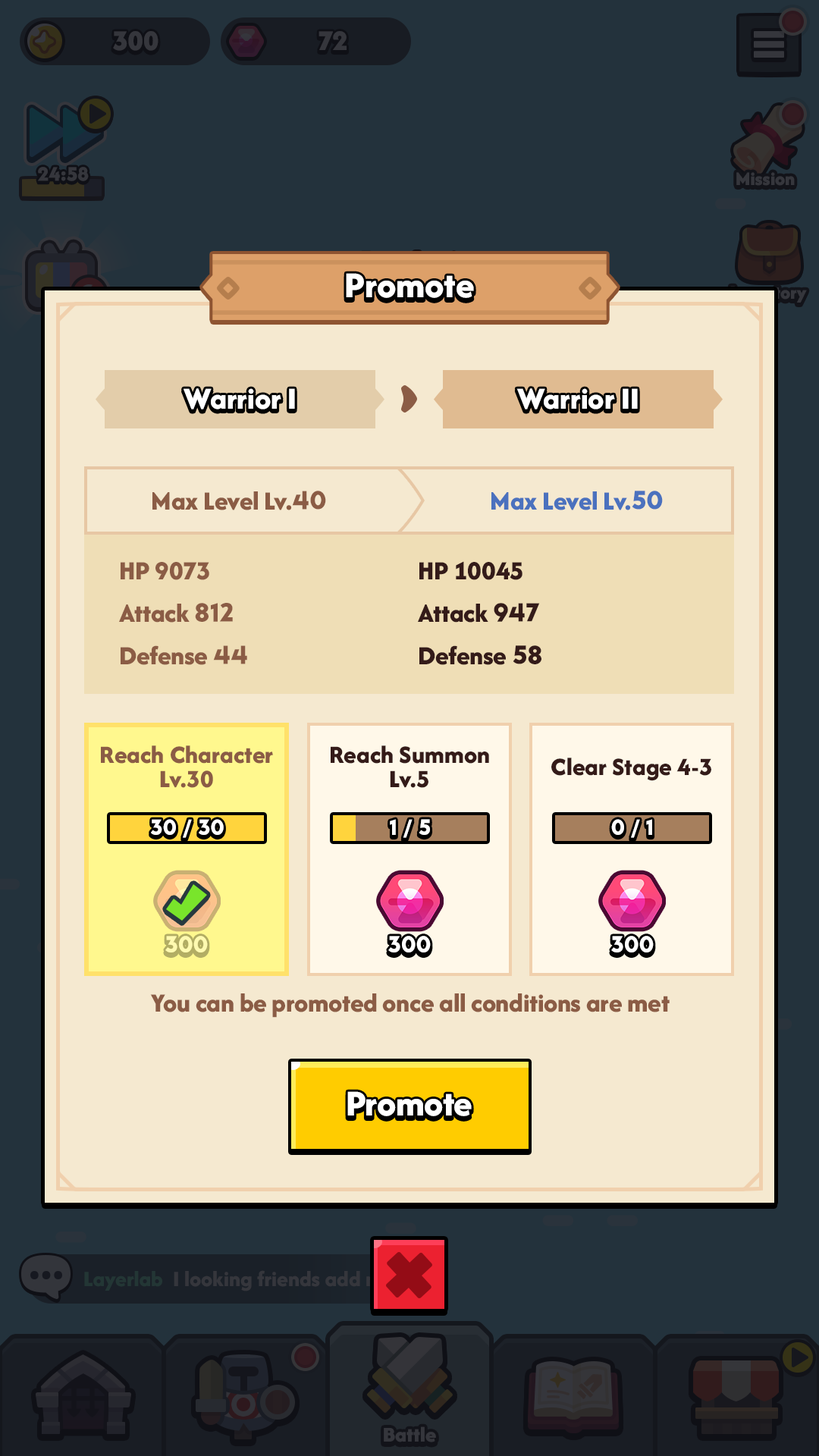
<style>
.page{position:relative;width:819px;height:1456px;background:#23323c}
.page>*{position:absolute;margin:0}
.t1{font:37.9px "AfacadFlux-ExtraBold";color:#ffffff}
.t2{font:31.8px "AfacadFlux-ExtraBold";color:#ffffff}
.t3{font:27.3px "AfacadFlux-ExtraBold";letter-spacing:-0.01em;color:#8b5c45}
.t4{font:27.3px "LTAvocado-Bold";letter-spacing:-0.01em;color:#8b5c45}
.t5{font:27.3px "AfacadFlux-ExtraBold";letter-spacing:-0.01em;color:#4b71be}
.t6{font:27.3px "LTAvocado-Bold";letter-spacing:-0.01em;color:#4b71be}
.t7{font:27.3px/42.5px "AfacadFlux-ExtraBold";letter-spacing:-0.01em;color:#8b5c45}
.t8{font:27.3px/42.5px "LTAvocado-Bold";letter-spacing:-0.01em;color:#8b5c45}
.t9{font:27.3px/42.5px "AfacadFlux-ExtraBold";letter-spacing:-0.01em;color:#341b19}
.t10{font:27.3px/42.5px "LTAvocado-Bold";letter-spacing:-0.01em;color:#341b19}
.t11{font:25.8px/24.3px "AfacadFlux-ExtraBold";color:#8b5c45}
.t12{font:25.8px/24.3px "AfacadFlux-ExtraBold";color:#341b19}
.t13{font:25.8px "AfacadFlux-ExtraBold";color:#341b19}
.t14{font:22.7px "LTAvocado-Bold";color:#ffffff}
.t15{font:24.3px "LTAvocado-Bold";color:#fffab0}
.t16{font:24.3px "LTAvocado-Bold";color:#ffffff}
</style>
<div class="page">
<p class="t1" style="left:346px;top:273px;width:128px;height:25px">Promote</p>
<p class="t2" style="left:184px;top:388px;width:111px;height:21px">Warrior I</p>
<p class="t2" style="left:516px;top:388px;width:122px;height:21px">Warrior II</p>
<p class="t3" style="left:152px;top:491px;width:174px;height:19px">Max Level Lv.<span class="t4">40</span></p>
<p class="t5" style="left:491px;top:491px;width:172px;height:19px">Max Level Lv.<span class="t6">50</span></p>
<p class="t7" style="left:119px;top:562px;width:128px;height:103px">HP 9073<br>Attack <span class="t8">812<br></span>Defense <span class="t8">44</span></p>
<p class="t9" style="left:418px;top:561px;width:123px;height:104px">HP 10045<br>Attack <span class="t10">947<br></span>Defense <span class="t10">58</span></p>
<p class="t11" style="left:101px;top:745px;width:172px;height:43px;text-align:center">Reach Character<br>Lv.30</p>
<p class="t12" style="left:331px;top:745px;width:158px;height:43px;text-align:center">Reach Summon<br>Lv.5</p>
<p class="t13" style="left:551px;top:758px;width:160px;height:23px">Clear Stage 4-3</p>
<p class="t14" style="left:151px;top:819px;width:73px;height:19px">30 / 30</p>
<p class="t14" style="left:390px;top:819px;width:40px;height:19px">1 / 5</p>
<p class="t14" style="left:611px;top:819px;width:41px;height:19px">0 / 1</p>
<p class="t15" style="left:165px;top:936px;width:43px;height:16px">300</p>
<p class="t16" style="left:388px;top:936px;width:43px;height:16px">300</p>
<p class="t16" style="left:611px;top:936px;width:43px;height:16px">300</p>
<p class="t3" style="left:150px;top:993px;width:520px;height:25px">You can be promoted once all conditions are met</p>
<p class="t1" style="left:347px;top:1091px;width:125px;height:25px">Promote</p>
</div>
